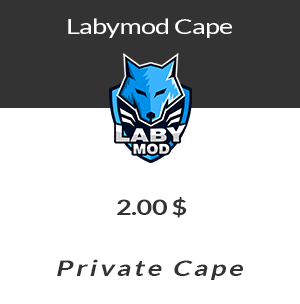
<style>
.page{position:relative;width:300px;height:304px;background:#ffffff}
.page>*{position:absolute;margin:0}
.t1{font:21.3px "Lato-Regular";letter-spacing:-0.025em;color:#ffffff;scale:1.26 1}
.t2{font:21.6px "Lato-Bold";letter-spacing:-0.025em;color:#333333;scale:1.26 1}
.t3{font:21.6px "Lato-Bold";letter-spacing:0.1em;color:#333333;font-style:italic;scale:1.26 1}
</style>
<div class="page">
<p class="t1" style="left:68px;top:18px;width:164px;height:20px">Labymod Cape</p>
<p class="t2" style="left:117px;top:197px;width:70px;height:21px">2.00 $</p>
<p class="t3" style="left:57px;top:259px;width:186px;height:21px">Private Cape</p>
</div>
